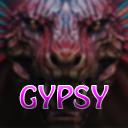
<style>
.page{position:relative;width:128px;height:128px}
.page>*{position:absolute;margin:0}
.t1{font:33.3px "Hobo"}
</style>
<div class="page">
<p class="t1" style="left:19px;top:85px;width:90px;height:24px">GYPSY</p>
</div>
